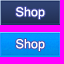
<style>
.page{position:relative;width:64px;height:64px;background:#ff00ff}
.page>*{position:absolute;margin:0}
.t1{font:20px "Kartika";color:#ffffff}
</style>
<div class="page">
<p class="t1" style="left:16px;top:7px;width:29px;height:12px">Shop</p>
<p class="t1" style="left:16px;top:39px;width:29px;height:12px">Shop</p>
</div>
